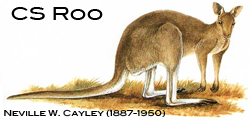
<style>
.page{position:relative;width:250px;height:120px;background:#fefefe}
.page>*{position:absolute;margin:0}
.t1{font:18px "BlairMdITCTTMedium";color:#000000}
.t2{font:8px "BlairMdITCTTMedium";color:#000000}
</style>
<div class="page">
<p class="t1" style="left:11px;top:7px;width:92px;height:13px">CS Roo</p>
<p class="t2" style="left:4px;top:109px;width:161px;height:8px">Neville W. Cayley (1887-1950)</p>
</div>
